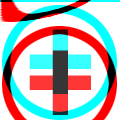
<style>
.page{position:relative;width:120px;height:120px;background:#ffffff}
.page>*{position:absolute;margin:0}
.t1{font:112px "MuseoSans-900"}
</style>
<div class="page">
<p class="t1" style="left:29px;top:27px;width:62px;height:65px">+</p>
</div>
